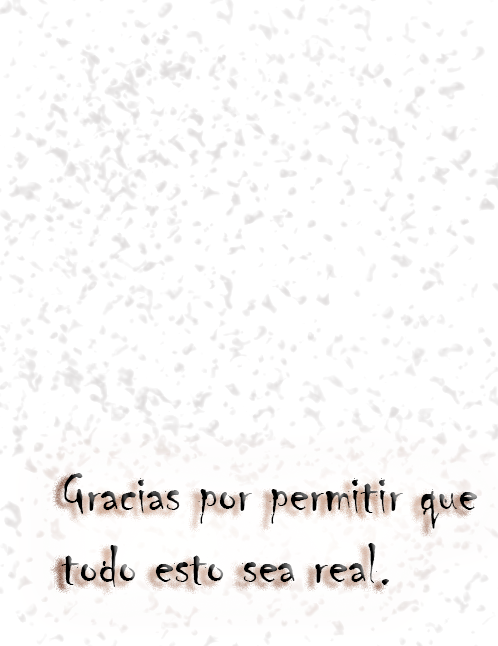
<style>
.page{position:relative;width:498px;height:646px;background:#ffffff}
.page>*{position:absolute;margin:0}
.t1{font:60px "Chiller-Regular"}
</style>
<div class="page">
<p class="t1" style="left:61px;top:473px;width:417px;height:114px">Gracias por permitir que<br>todo esto sea real.</p>
</div>
